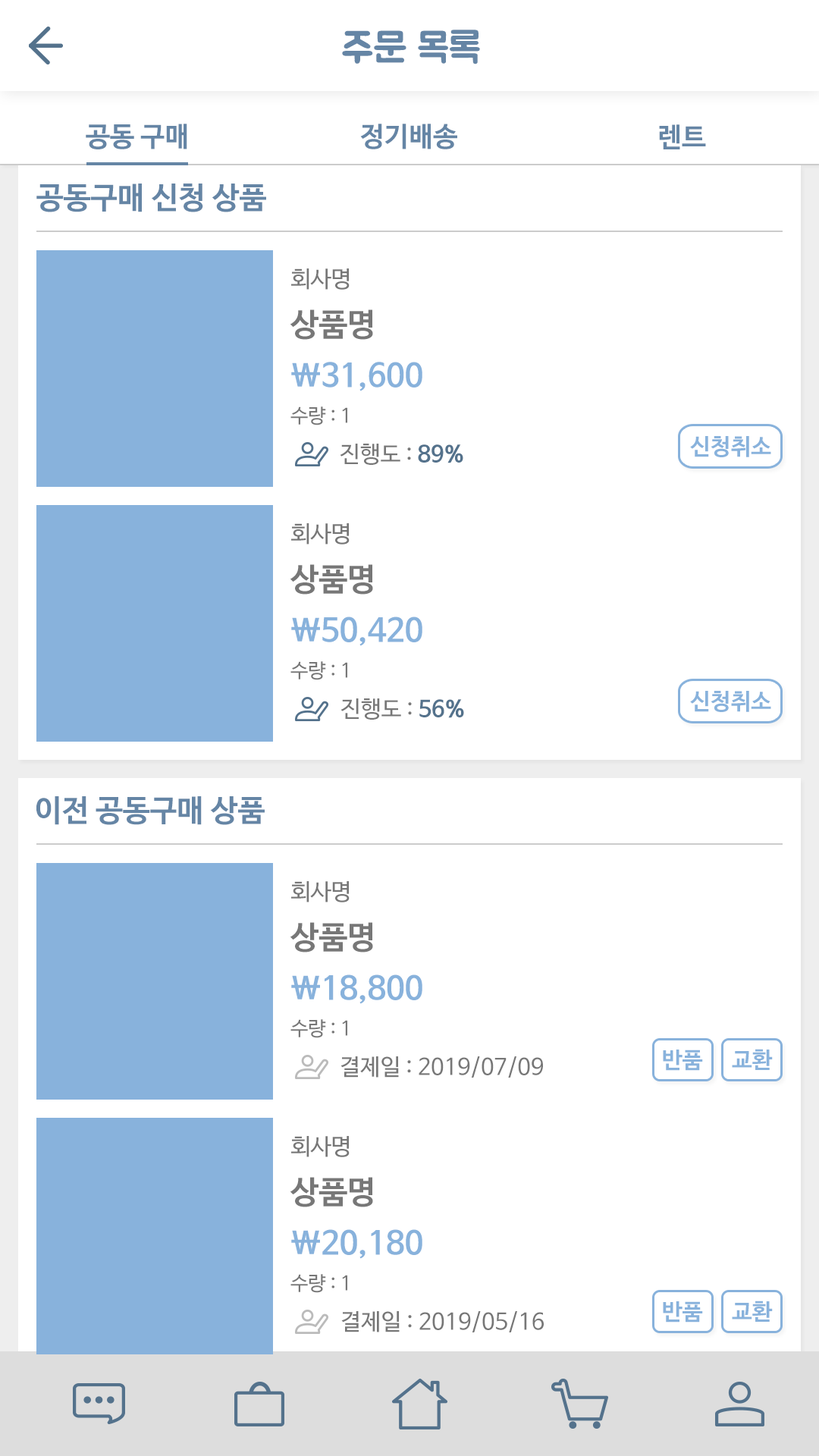
<style>
.page{position:relative;width:819px;height:1456px;background:#ffffff}
.page>*{position:absolute;margin:0}
.t1{font:40.9px "BMJUA";color:#6585a5}
.t2{font:27.3px "NanumBarunGothicBold";color:#6585a5}
.t3{font:30.3px "NanumBarunGothicBold";color:#6585a5}
.t4{font:22.7px "NanumBarunGothic";color:#777777}
.t5{font:31.8px "NanumBarunGothicBold";color:#777777}
.t6{font:31.8px "NanumBarunGothicBold";color:#88b2dc}
.t7{font:19.7px "NanumBarunGothic";color:#777777}
.t8{font:22.7px "NanumBarunGothicBold";color:#88b2dc}
.t9{font:22.7px "NanumBarunGothicBold";color:#54728c}
</style>
<div class="page">
<p class="t1" style="left:342px;top:30px;width:138px;height:34px">주문 목록</p>
<p class="t2" style="left:86px;top:124px;width:101px;height:25px">공동 구매</p>
<p class="t2" style="left:360px;top:124px;width:97px;height:25px">정기배송</p>
<p class="t2" style="left:659px;top:124px;width:47px;height:25px">렌트</p>
<p class="t3" style="left:36px;top:184px;width:230px;height:28px">공동구매 신청 상품</p>
<p class="t4" style="left:291px;top:268px;width:59px;height:22px">회사명</p>
<p class="t5" style="left:290px;top:309px;width:83px;height:31px">상품명</p>
<p class="t6" style="left:291px;top:362px;width:131px;height:29px">\31,600</p>
<p class="t7" style="left:290px;top:406px;width:57px;height:19px">수량 : 1</p>
<p class="t8" style="left:690px;top:436px;width:81px;height:21px">신청취소</p>
<p class="t4" style="left:340px;top:444px;width:123px;height:21px">진행도 : <span class="t9">89%</span></p>
<p class="t4" style="left:291px;top:523px;width:59px;height:21px">회사명</p>
<p class="t5" style="left:290px;top:564px;width:83px;height:31px">상품명</p>
<p class="t6" style="left:291px;top:617px;width:131px;height:29px">\50,420</p>
<p class="t7" style="left:290px;top:661px;width:57px;height:19px">수량 : 1</p>
<p class="t4" style="left:340px;top:698px;width:124px;height:22px">진행도 : <span class="t9">56%</span></p>
<p class="t8" style="left:690px;top:691px;width:81px;height:21px">신청취소</p>
<p class="t3" style="left:36px;top:796px;width:229px;height:29px">이전 공동구매 상품</p>
<p class="t4" style="left:291px;top:881px;width:59px;height:21px">회사명</p>
<p class="t5" style="left:290px;top:922px;width:83px;height:30px">상품명</p>
<p class="t6" style="left:291px;top:974px;width:131px;height:30px">\18,800</p>
<p class="t7" style="left:290px;top:1019px;width:57px;height:19px">수량 : 1</p>
<p class="t8" style="left:663px;top:1050px;width:40px;height:21px">반품</p>
<p class="t8" style="left:732px;top:1049px;width:41px;height:21px">교환</p>
<p class="t4" style="left:340px;top:1056px;width:203px;height:22px">결제일 : 2019/07/09</p>
<p class="t4" style="left:291px;top:1136px;width:59px;height:21px">회사명</p>
<p class="t5" style="left:290px;top:1177px;width:83px;height:30px">상품명</p>
<p class="t6" style="left:291px;top:1229px;width:131px;height:30px">\20,180</p>
<p class="t7" style="left:290px;top:1274px;width:57px;height:19px">수량 : 1</p>
<p class="t8" style="left:663px;top:1301px;width:40px;height:22px">반품</p>
<p class="t8" style="left:732px;top:1301px;width:41px;height:21px">교환</p>
<p class="t4" style="left:341px;top:1311px;width:203px;height:21px">결제일 : 2019/05/16</p>
</div>
